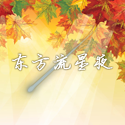
<style>
.page{position:relative;width:125px;height:125px}
.page>*{position:absolute;margin:0}
.t1{font:19.5px "FZYBXSJW--GB1-0";letter-spacing:0.05em;color:#ffffff;font-weight:bold}
</style>
<div class="page">
<p class="t1" style="left:11px;top:53px;width:102px;height:18px">东方流星夜</p>
</div>
